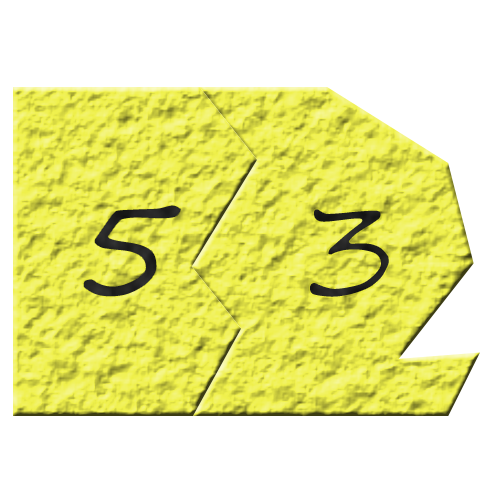
<style>
.page{position:relative;width:500px;height:500px;background:#ffffff}
.page>*{position:absolute;margin:0}
.t1{font:140px "SegoeScript";color:#272726}
.t2{font:140px "SegoeScript"}
</style>
<div class="page">
<p class="t1" style="left:82px;top:204px;width:100px;height:94px">5</p>
<p class="t2" style="left:308px;top:207px;width:83px;height:92px">3</p>
</div>
